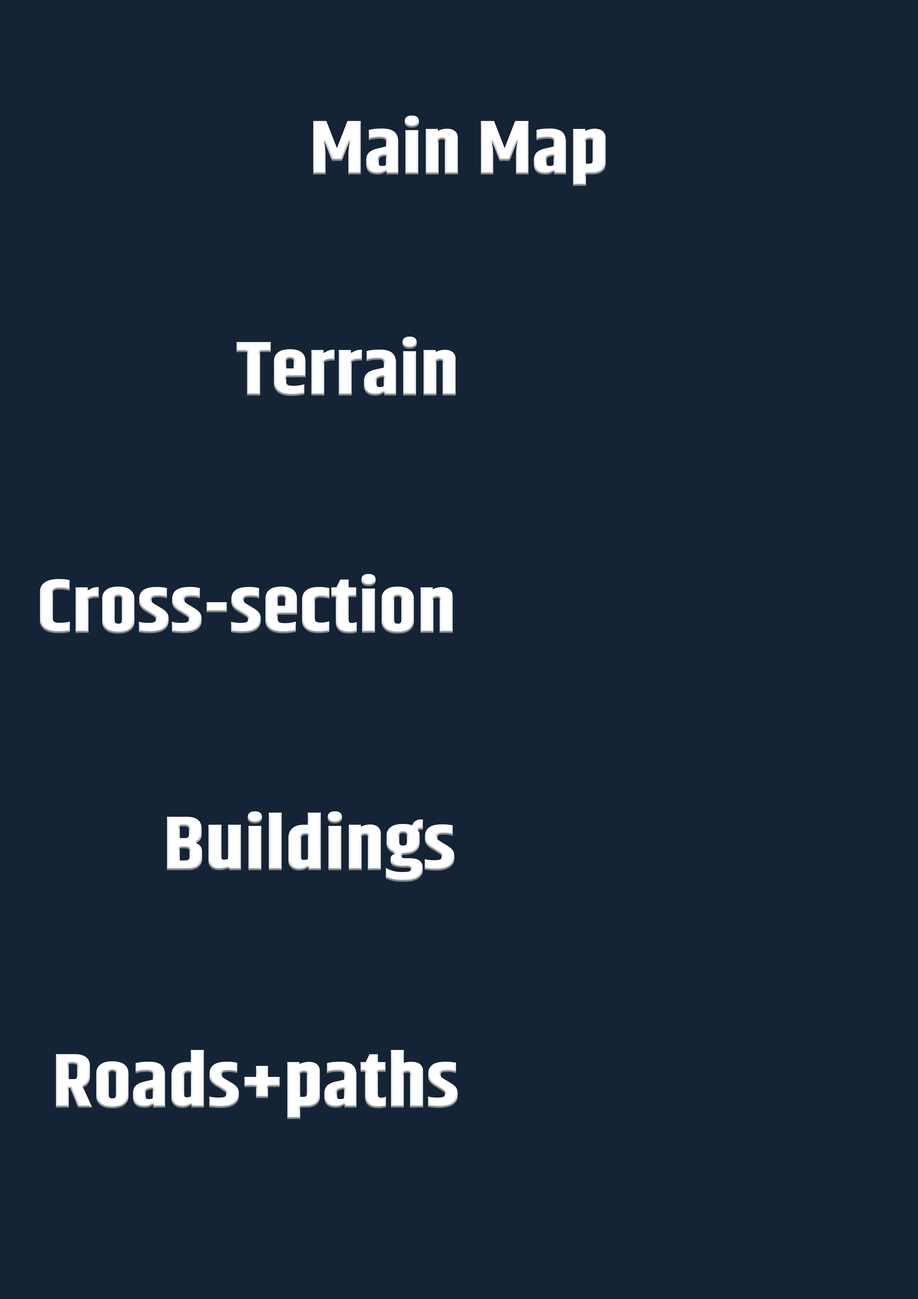
<style>
.page{position:relative;width:918px;height:1299px;background:#142436}
.page>*{position:absolute;margin:0}
.t1{font:77.1px "Khand-Bold";color:#ffffff;scale:1.1 1}
</style>
<div class="page">
<p class="t1" style="left:313px;top:116px;width:293px;height:70px">Main Map</p>
<p class="t1" style="left:237px;top:337px;width:219px;height:59px">Terrain</p>
<p class="t1" style="left:40px;top:574px;width:413px;height:60px">Cross-section</p>
<p class="t1" style="left:167px;top:811px;width:288px;height:71px">Buildings</p>
<p class="t1" style="left:56px;top:1050px;width:402px;height:69px">Roads+paths</p>
</div>
